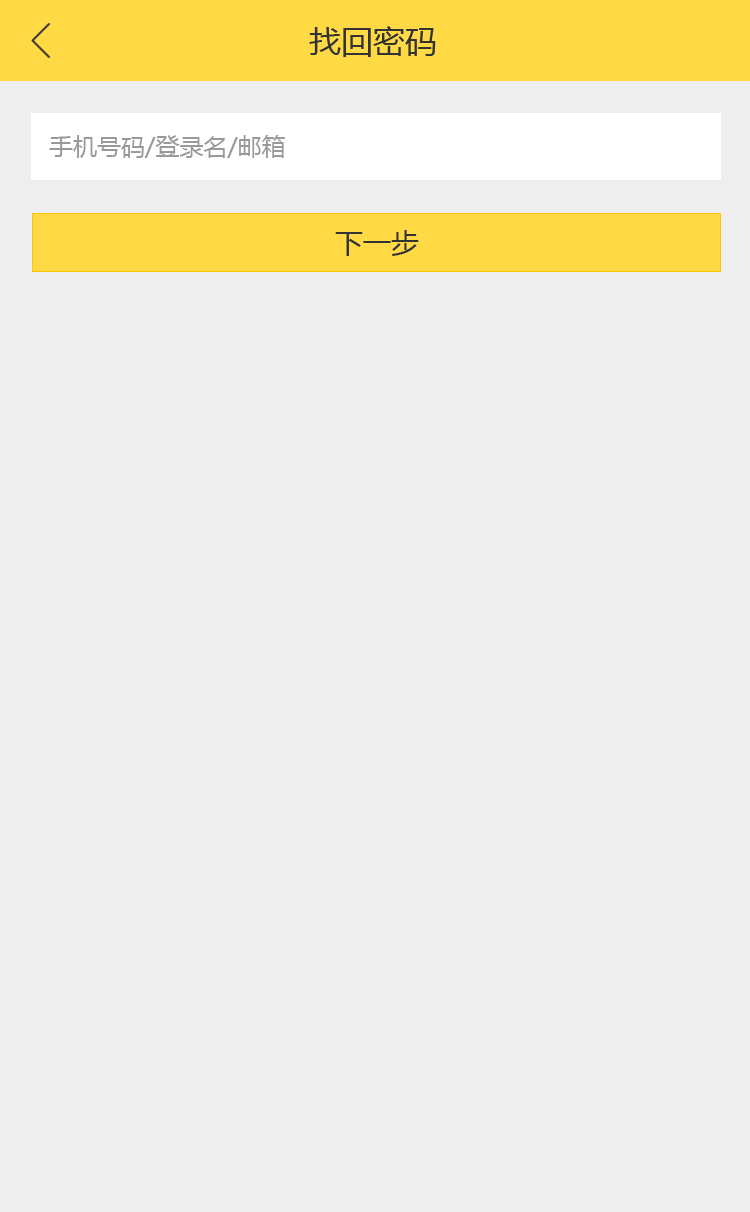
<style>
.page{position:relative;width:750px;height:1212px;background:#eeeeee}
.page>*{position:absolute;margin:0}
.t1{font:32px "MicrosoftYaHei";color:#333333}
.t2{font:24px "MicrosoftYaHei";color:#999999}
.t3{font:28px "MicrosoftYaHei";color:#333333}
</style>
<div class="page">
<p class="t1" style="left:309px;top:26px;width:127px;height:31px">找回密码</p>
<p class="t2" style="left:49px;top:135px;width:236px;height:23px">手机号码/登录名/邮箱</p>
<p class="t3" style="left:335px;top:230px;width:84px;height:26px">下一步</p>
</div>
